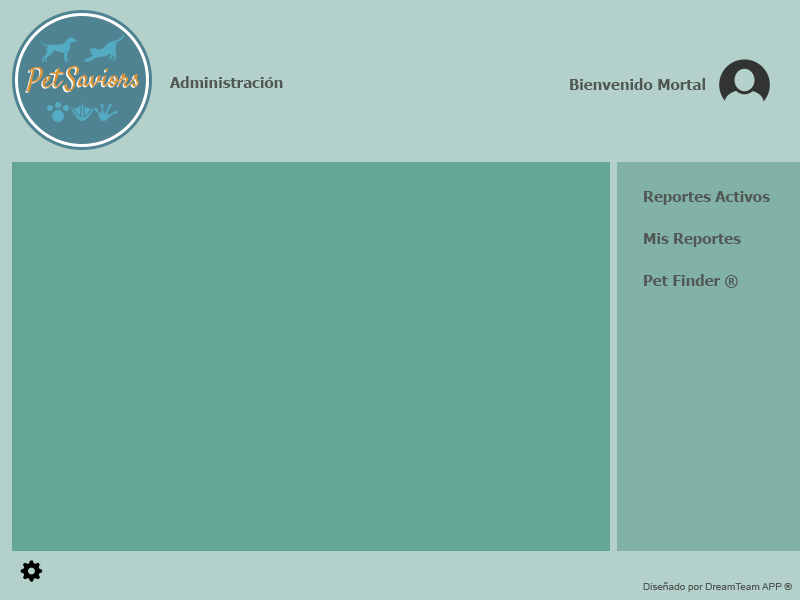
<style>
.page{position:relative;width:800px;height:600px;background:#64a696}
.page>*{position:absolute;margin:0}
.t1{font:27.3px "Satisfy";color:#d79331}
.t2{font:27.3px "Satisfy"}
.t3{font:27.3px "Satisfy";color:#d79230}
.t4{font:15px "Tahoma-Bold";color:#515755}
.t5{font:10px "ArialMT";color:#515755}
</style>
<div class="page">
<p class="t1" style="left:64px;top:65px;width:75px;height:27px">Saviors</p>
<p class="t2" style="left:25px;top:68px;width:38px;height:25px">Pet</p>
<p class="t3" style="left:26px;top:67px;width:39px;height:25px">Pet</p>
<p class="t2" style="left:62px;top:66px;width:76px;height:27px">Saviors</p>
<p class="t4" style="left:170px;top:76px;width:113px;height:12px">Administración</p>
<p class="t4" style="left:570px;top:78px;width:135px;height:12px">Bienvenido Mortal</p>
<p class="t4" style="left:644px;top:191px;width:126px;height:14px">Reportes Activos</p>
<p class="t4" style="left:644px;top:233px;width:97px;height:14px">Mis Reportes</p>
<p class="t4" style="left:644px;top:274px;width:94px;height:14px">Pet Finder ®</p>
<p class="t5" style="left:643px;top:582px;width:149px;height:10px">Diseñado por DreamTeam APP ®</p>
</div>
